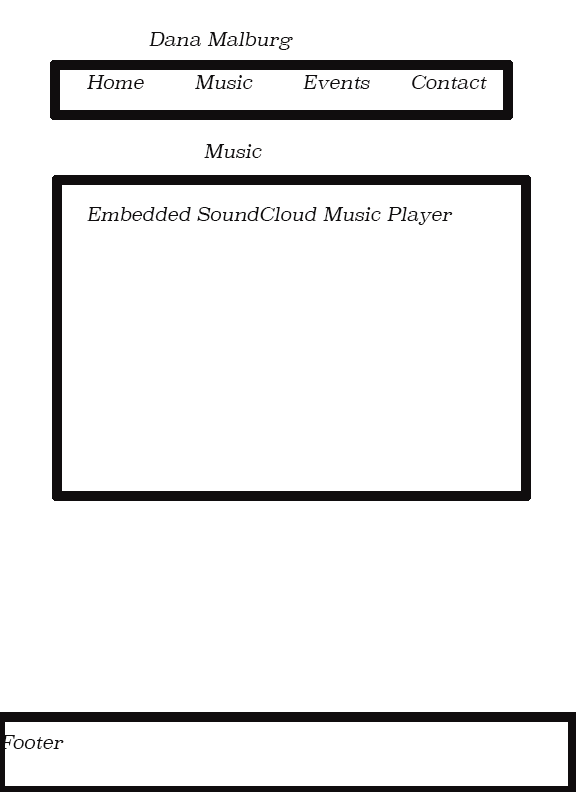
<style>
.page{position:relative;width:576px;height:792px;background:#ffffff}
.page>*{position:absolute;margin:0}
.t1{font:18px "Superclarendon-LightItalic";color:#0f0d0e}
</style>
<div class="page">
<p class="t1" style="left:149px;top:32px;width:144px;height:18px">Dana Malburg</p>
<p class="t1" style="left:87px;top:75px;width:400px;height:14px">Home  Music  Events  Contact</p>
<p class="t1" style="left:204px;top:144px;width:58px;height:14px">Music</p>
<p class="t1" style="left:87px;top:207px;width:366px;height:18px">Embedded SoundCloud Music Player</p>
<p class="t1" style="left:0px;top:735px;width:64px;height:14px">Footer</p>
</div>
